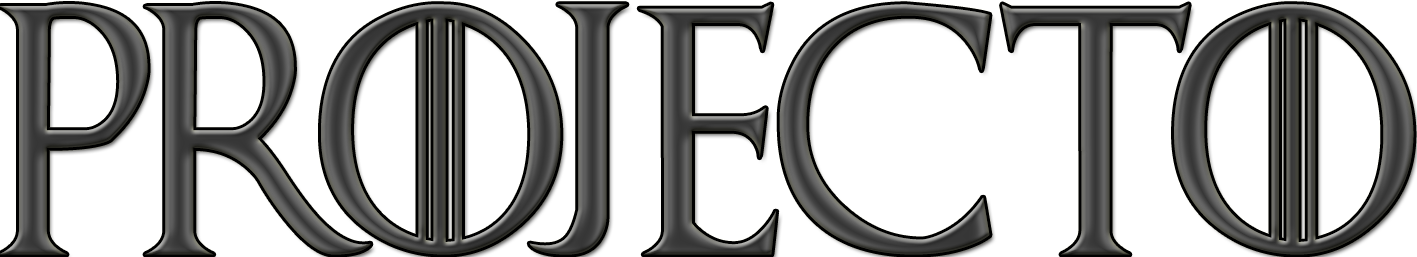
<style>
.page{position:relative;width:1417px;height:257px;background:#ffffff}
.page>*{position:absolute;margin:0}
.t1{font:250px "GameofThrones";scale:0.96 1}
</style>
<div class="page">
<p class="t1" style="left:0px;top:4px;width:1414px;height:251px">PROJECTO</p>
</div>
